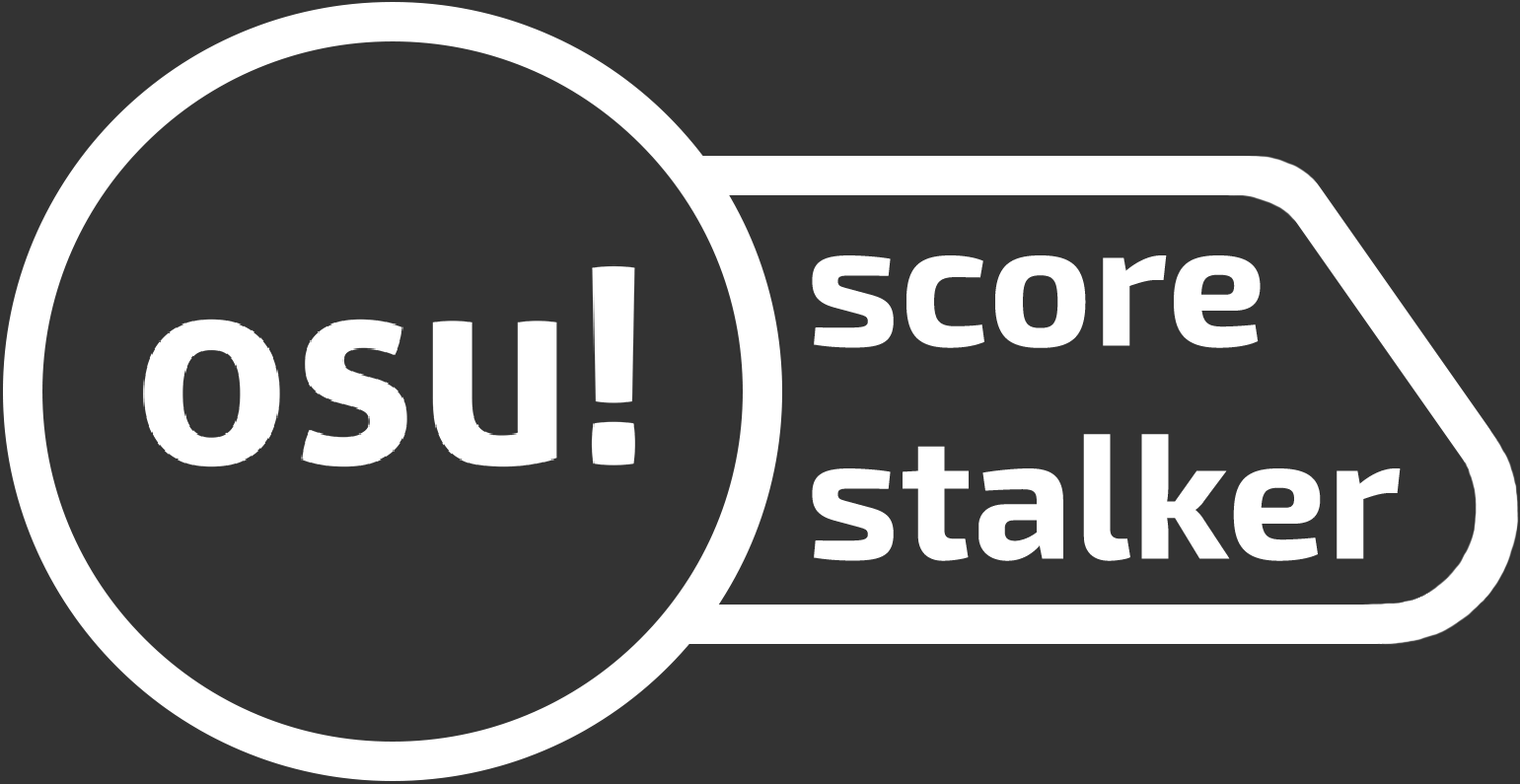
<style>
.page{position:relative;width:1520px;height:784px;background:#333333}
.page>*{position:absolute;margin:0}
.t1{font:177.6px "Exo2-Bold";color:#ffffff}
</style>
<div class="page">
<p class="t1" style="left:812px;top:256px;width:589px;height:305px">score<br>stalker</p>
</div>
